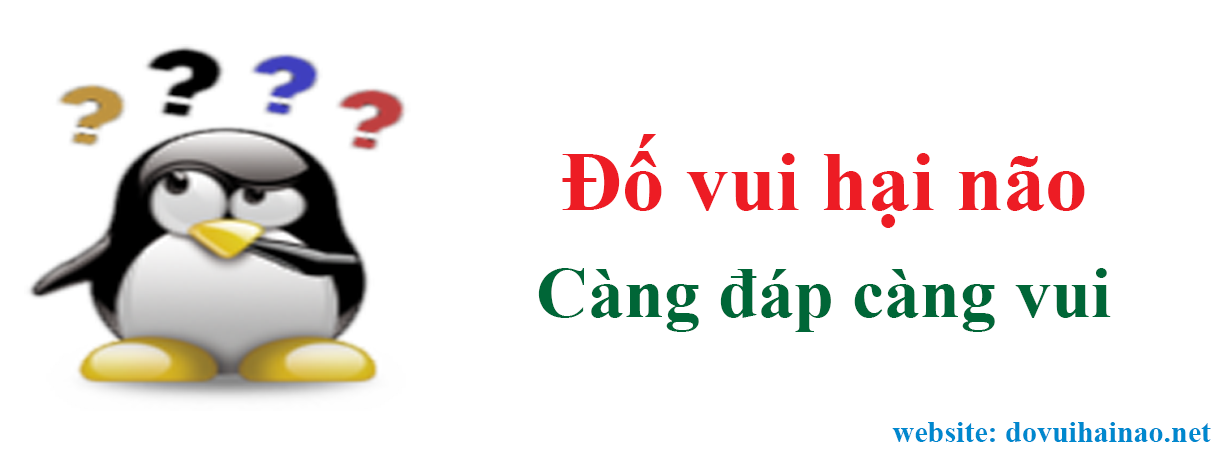
<style>
.page{position:relative;width:1222px;height:465px;background:#ffffff}
.page>*{position:absolute;margin:0}
.t1{font:85.3px "TimesNewRomanPS-BoldMT";color:#ed1c24}
.t2{font:72px "TimesNewRomanPS-BoldMT";color:#006637}
.t3{font:30px "TimesNewRomanPS-BoldMT";color:#0088ce}
</style>
<div class="page">
<p class="t1" style="left:562px;top:134px;width:523px;height:94px">Đố vui hại não</p>
<p class="t2" style="left:538px;top:268px;width:573px;height:64px">Càng đáp càng vui</p>
<p class="t3" style="left:892px;top:422px;width:319px;height:20px">website: dovuihainao.net</p>
</div>
